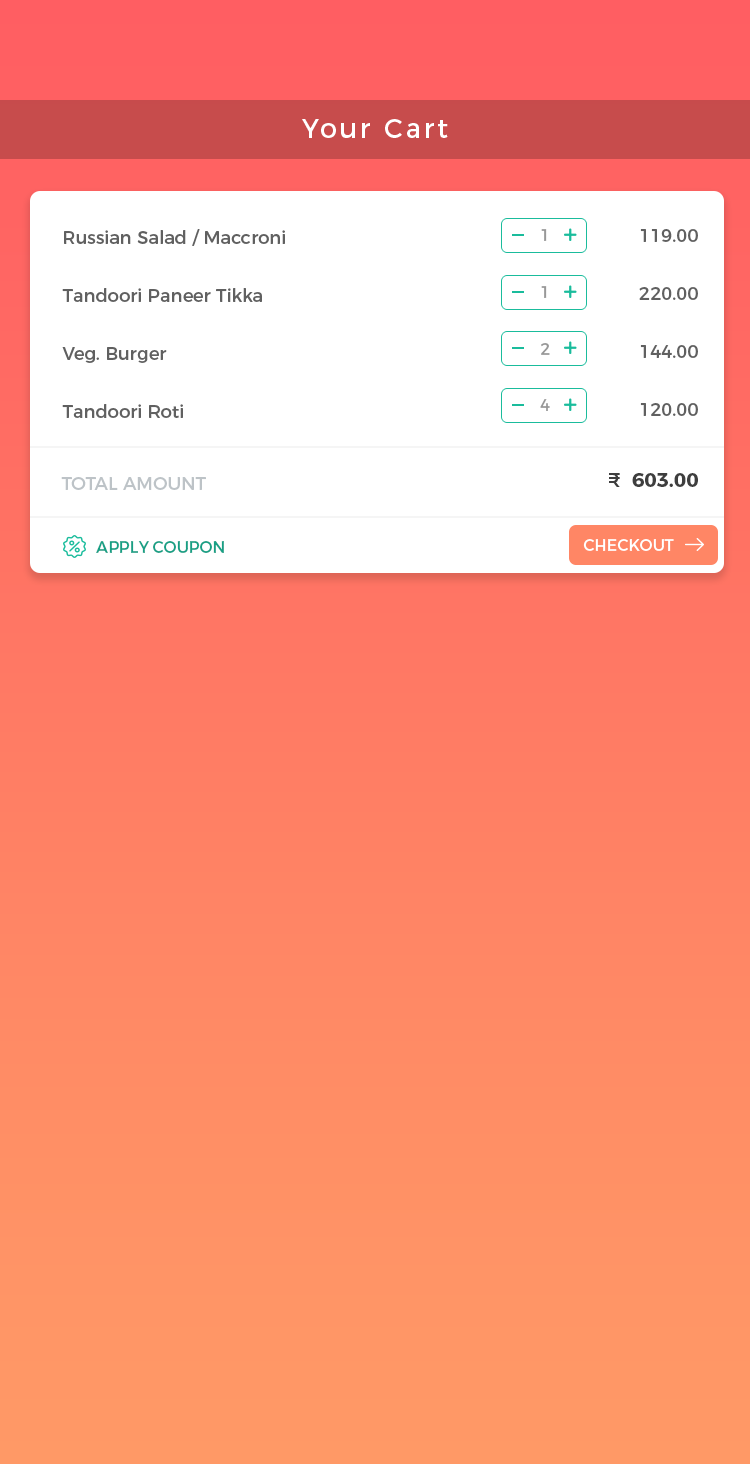
<style>
.page{position:relative;width:750px;height:1464px;background:#ffffff}
.page>*{position:absolute;margin:0}
.t1{font:27px "Montserrat-Regular";letter-spacing:0.1em;color:#ffffff}
.t2{font:18px/58px "Montserrat-Regular";color:#606060}
.t3{font:16px "Montserrat-Regular";letter-spacing:0.1em;color:#989898}
.t4{font:20px "Montserrat-Bold";color:#3e3e3e}
.t5{font:20px "Montserrat-Medium";color:#3e3e3e}
.t6{font:18px "Montserrat-Regular";color:#bdc3c7;text-transform:uppercase}
.t7{font:16px "Montserrat-Regular";color:#16a085;text-transform:uppercase}
.t8{font:16px "Montserrat-Regular";color:#ffffff;text-transform:uppercase}
</style>
<div class="page">
<p class="t1" style="left:302px;top:119px;width:146px;height:19px">Your Cart</p>
<p class="t2" style="left:62px;top:229px;width:223px;height:189px">Russian Salad / Maccroni<br>Tandoori Paneer Tikka<br>Veg. Burger<br>Tandoori Roti</p>
<p class="t3" style="left:541px;top:229px;width:6px;height:12px">1</p>
<p class="t2" style="left:639px;top:229px;width:59px;height:187px;text-align:right">119.00<br>220.00<br>144.00<br>120.00</p>
<p class="t3" style="left:541px;top:286px;width:6px;height:12px">1</p>
<p class="t3" style="left:541px;top:343px;width:9px;height:12px">2</p>
<p class="t3" style="left:540px;top:399px;width:10px;height:12px">4</p>
<p class="t4" style="left:609px;top:473px;width:89px;height:14px"><span class="t5">₹</span>  603.00</p>
<p class="t6" style="left:61px;top:477px;width:145px;height:13px">Total Amount</p>
<p class="t7" style="left:96px;top:541px;width:128px;height:12px">Apply Coupon</p>
<p class="t8" style="left:583px;top:539px;width:91px;height:12px">Checkout</p>
</div>
